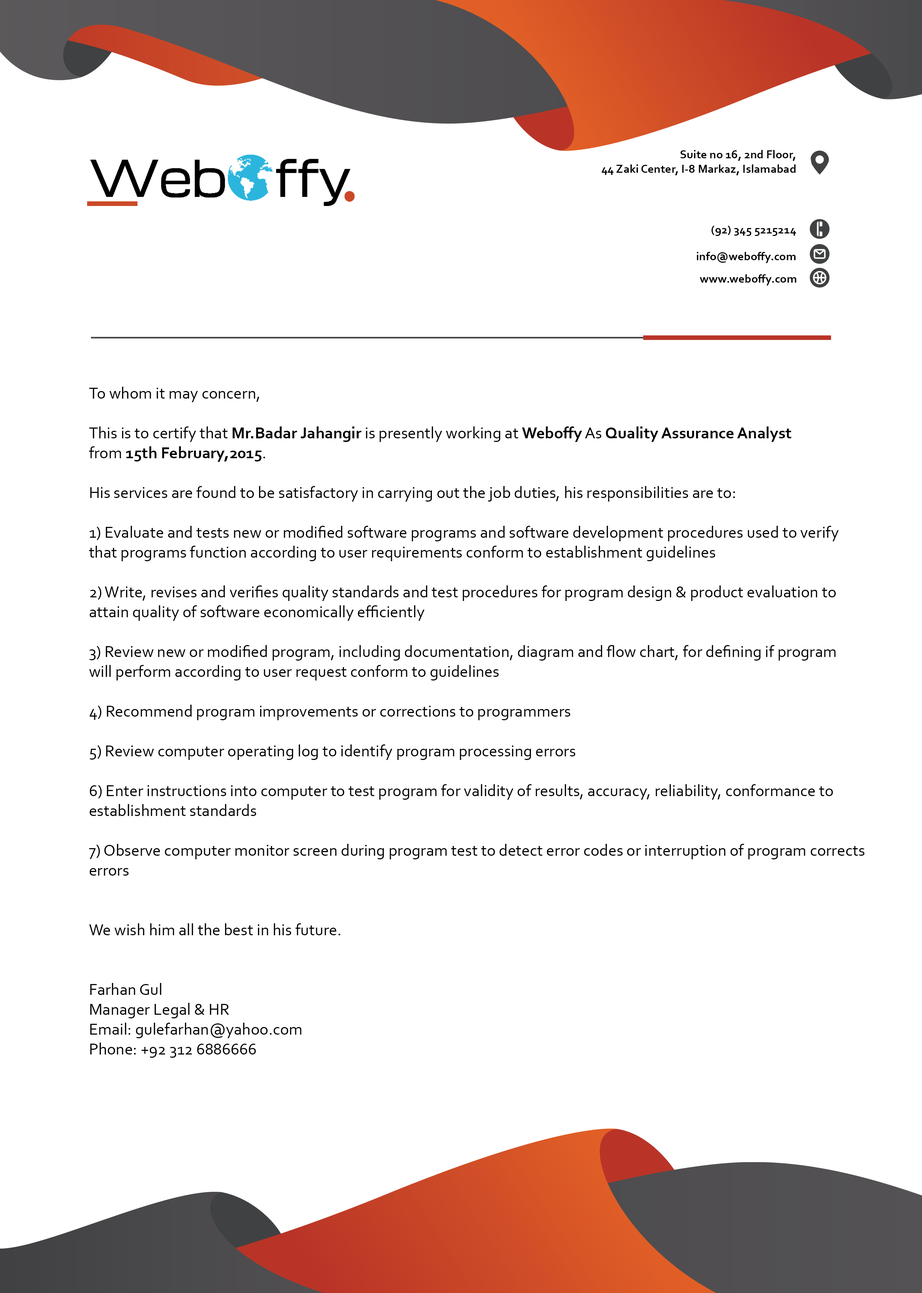
<style>
.page{position:relative;width:922px;height:1293px;background:#ffffff}
.page>*{position:absolute;margin:0}
.t1{font:12px "Corbel-Bold";color:#000000}
.t2{font:16.6px "Corbel";color:#000000}
.t3{font:16.6px "Corbel-Bold";color:#000000}
</style>
<div class="page">
<p class="t1" style="left:602px;top:150px;width:194px;height:25px;text-align:right">Suite no 16, 2nd Floor,<br>44 Zaki Center, I-8 Markaz, Islamabad</p>
<p class="t1" style="left:711px;top:226px;width:85px;height:10px">(92) 345 5215214</p>
<p class="t1" style="left:697px;top:252px;width:99px;height:11px">info@weboffy.com</p>
<p class="t1" style="left:700px;top:274px;width:96px;height:12px">www.weboffy.com</p>
<p class="t2" style="left:89px;top:387px;width:776px;height:671px">To whom it may concern,<br><br>This is to certify that <span class="t3">Mr.Badar Jahangir</span> is presently working at <span class="t3">Weboffy</span> As <span class="t3">Quality Assurance Analyst</span> <br>from <span class="t3">15th February,2015</span>.<br><br>His services are found to be satisfactory in carrying out the job duties, his responsibilities are to:<br><br>1) Evaluate and tests new or modified software programs and software development procedures used to verify <br>that programs function according to user requirements conform to establishment guidelines<br><br>2) Write, revises and verifies quality standards and test procedures for program design &amp; product evaluation to <br>attain quality of software economically efficiently<br><br>3) Review new or modified program, including documentation, diagram and flow chart, for defining if program <br>will perform according to user request conform to guidelines<br><br>4) Recommend program improvements or corrections to programmers<br><br>5) Review computer operating log to identify program processing errors<br><br>6) Enter instructions into computer to test program for validity of results, accuracy, reliability, conformance to <br>establishment standards<br><br>7) Observe computer monitor screen during program test to detect error codes or interruption of program corrects <br>errors<br><br><br>We wish him all the best in his future.<br><br><br>Farhan Gul<br>Manager Legal &amp; HR<br>Email: gulefarhan@yahoo.com<br>Phone: +92 312 6886666</p>
</div>
